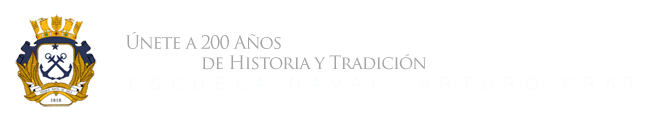
<style>
.page{position:relative;width:667px;height:120px;background:#ffffff}
.page>*{position:absolute;margin:0}
.t1{font:18px "TrajanPro-Regular";letter-spacing:-0.05em;color:#a5a4a4}
</style>
<div class="page">
<p class="t1" style="left:126px;top:31px;width:155px;height:18px">Únete a 200 Años</p>
<p class="t1" style="left:202px;top:54px;width:224px;height:16px">de Historia y Tradición</p>
</div>
